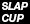
<style>
.page{position:relative;width:30px;height:24px;background:#000000}
.page>*{position:absolute;margin:0}
.t1{font:10.2px "HelveticaNeueforIB-BdIt";color:#ffffff}
</style>
<div class="page">
<p class="t1" style="left:2px;top:2px;width:26px;height:20px">SLAP<br>CUP</p>
</div>
